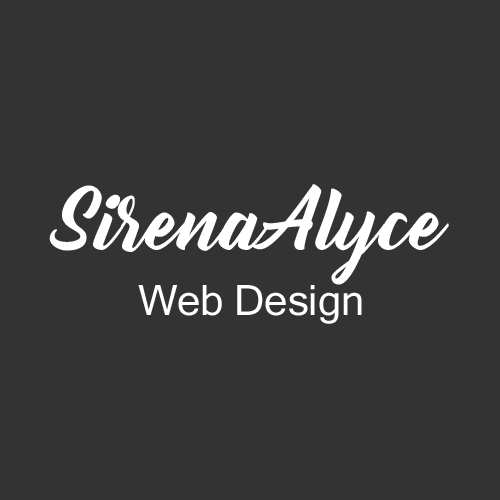
<style>
.page{position:relative;width:500px;height:500px;background:#333333}
.page>*{position:absolute;margin:0}
.t1{font:75px "Bernadette";color:#ffffff}
.t2{font:41.7px "MicrosoftSansSerif";color:#ffffff}
</style>
<div class="page">
<p class="t1" style="left:49px;top:184px;width:400px;height:101px">SirenaAlyce</p>
<p class="t2" style="left:138px;top:285px;width:224px;height:39px">Web Design</p>
</div>
